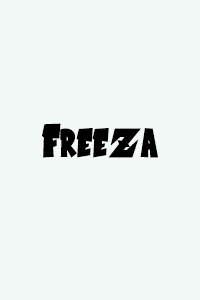
<style>
.page{position:relative;width:200px;height:300px;background:#f3f9f7}
.page>*{position:absolute;margin:0}
.t1{font:48px "SaiyanSans";color:#000000}
</style>
<div class="page">
<p class="t1" style="left:42px;top:123px;width:116px;height:35px">Freeza</p>
</div>
